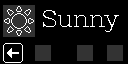
<style>
.page{position:relative;width:128px;height:64px;background:#000000}
.page>*{position:absolute;margin:0}
.t1{font:24px "NixieOne";color:#ffffff}
</style>
<div class="page">
<p class="t1" style="left:43px;top:9px;width:77px;height:24px">Sunny</p>
</div>
